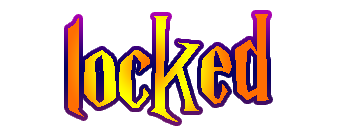
<style>
.page{position:relative;width:338px;height:135px;background:#ffffff}
.page>*{position:absolute;margin:0}
.t1{font:141px "HarryP";scale:0.86 1}
</style>
<div class="page">
<p class="t1" style="left:68px;top:14px;width:201px;height:108px">locked</p>
</div>
